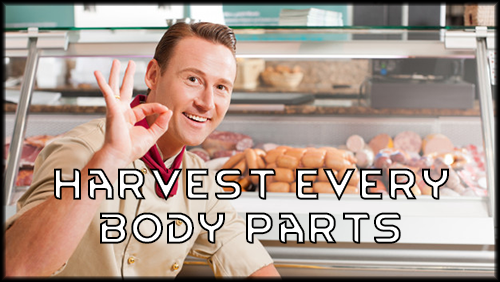
<style>
.page{position:relative;width:500px;height:282px}
.page>*{position:absolute;margin:0}
.t1{font:37.3px "RimWordFont";font-weight:bold}
</style>
<div class="page">
<p class="t1" style="left:54px;top:168px;width:395px;height:76px;text-align:center">Harvest Every<br>Body Parts</p>
</div>
